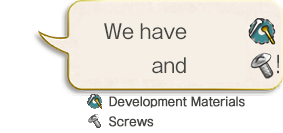
<style>
.page{position:relative;width:283px;height:133px;background:#ffffff}
.page>*{position:absolute;margin:0}
.t1{font:20px/34px "GothicMB101Pro-Regular";letter-spacing:-0.04em;color:#464642}
.t2{font:23.4px "GothicMB101Pro-Regular";letter-spacing:-0.04em;color:#464642;scale:0.85 1}
.t3{font:12px/20px "GothicMB101Pro-Regular";letter-spacing:-0.04em;color:#464642;font-weight:bold}
</style>
<div class="page">
<p class="t1" style="left:104px;top:23px;width:83px;height:51px;text-align:right">We have<br>and</p>
<p class="t2" style="left:277px;top:54px;width:2px;height:20px">!</p>
<p class="t3" style="left:109px;top:96px;width:136px;height:31px">Development Materials<br>Screws</p>
</div>
